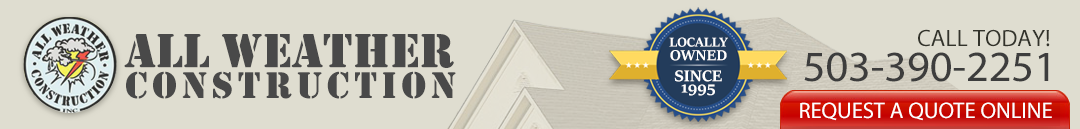
<style>
.page{position:relative;width:1080px;height:129px;background:#dfddd0}
.page>*{position:absolute;margin:0}
.t1{font:23.9px "MyriadPro-Regular";color:#33332b}
.t2{font:50px "Stencil";color:#494949}
.t3{font:14.3px/13.7px "SitkaHeading-Bold";color:#ffffff}
.t4{font:15.9px/13.7px "SitkaHeading-Bold";color:#ffffff}
.t5{font:43px "MyriadPro-Regular";color:#3d3d3d}
.t6{font:38.4px "Stencil";letter-spacing:0.12em;color:#494949}
.t7{font:17.1px/11.2px "SitkaHeading-Bold";color:#ffffff}
.t8{font:22.5px "MyriadPro-Regular";color:#ffffff}
</style>
<div class="page">
<p class="t1" style="left:918px;top:29px;width:132px;height:18px">CALL TODAY!</p>
<p class="t2" style="left:124px;top:34px;width:330px;height:34px">ALL WEATHER</p>
<p class="t3" style="left:669px;top:37px;width:59px;height:24px;text-align:center">LOCALLY<br><span class="t4">OWNED</span></p>
<p class="t5" style="left:804px;top:52px;width:245px;height:30px">503-390-2251</p>
<p class="t6" style="left:126px;top:71px;width:330px;height:28px">CONSTRUCTION</p>
<p class="t7" style="left:674px;top:70px;width:48px;height:26px;text-align:center">SINCE<br>1995</p>
<p class="t8" style="left:800px;top:102px;width:252px;height:19px">REQUEST A QUOTE ONLINE</p>
</div>
